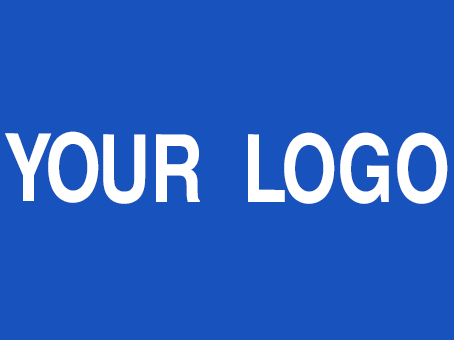
<style>
.page{position:relative;width:454px;height:340px;background:#1852bc}
.page>*{position:absolute;margin:0}
.t1{font:94.2px "HelveticaCE-Bold";color:#ffffff;scale:0.77 1}
</style>
<div class="page">
<p class="t1" style="left:5px;top:131px;width:443px;height:73px">YOUR  LOGO</p>
</div>
